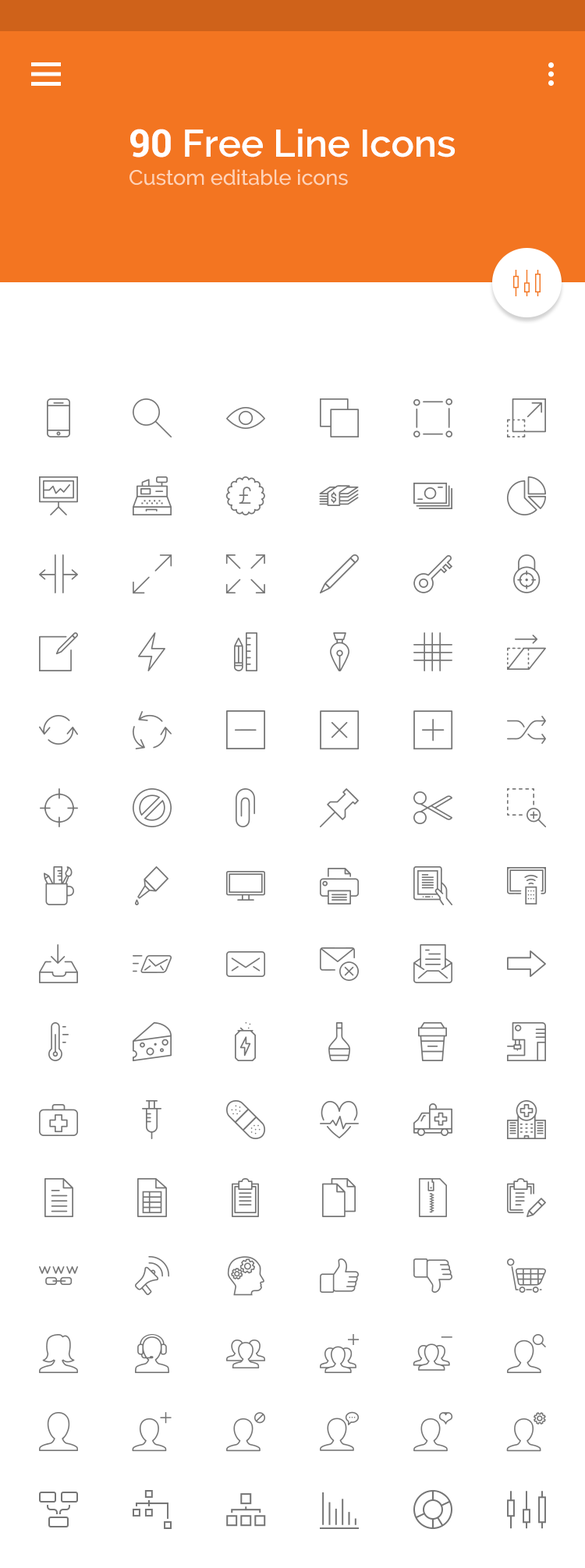
<style>
.page{position:relative;width:585px;height:1568px;background:#ffffff}
.page>*{position:absolute;margin:0}
.t1{font:21.1px/28.1px "Raleway-Medium";color:#fed3b6}
.t2{font:38.2px/28.1px "Roboto-Bold";color:#ffffff}
.t3{font:38.2px/28.1px "Raleway-SemiBold";color:#ffffff}
</style>
<div class="page">
<p class="t1" style="left:129px;top:129px;width:326px;height:57px"><span class="t2">90</span><span class="t3"> Free Line Icons<br></span>Custom editable icons</p>
</div>
